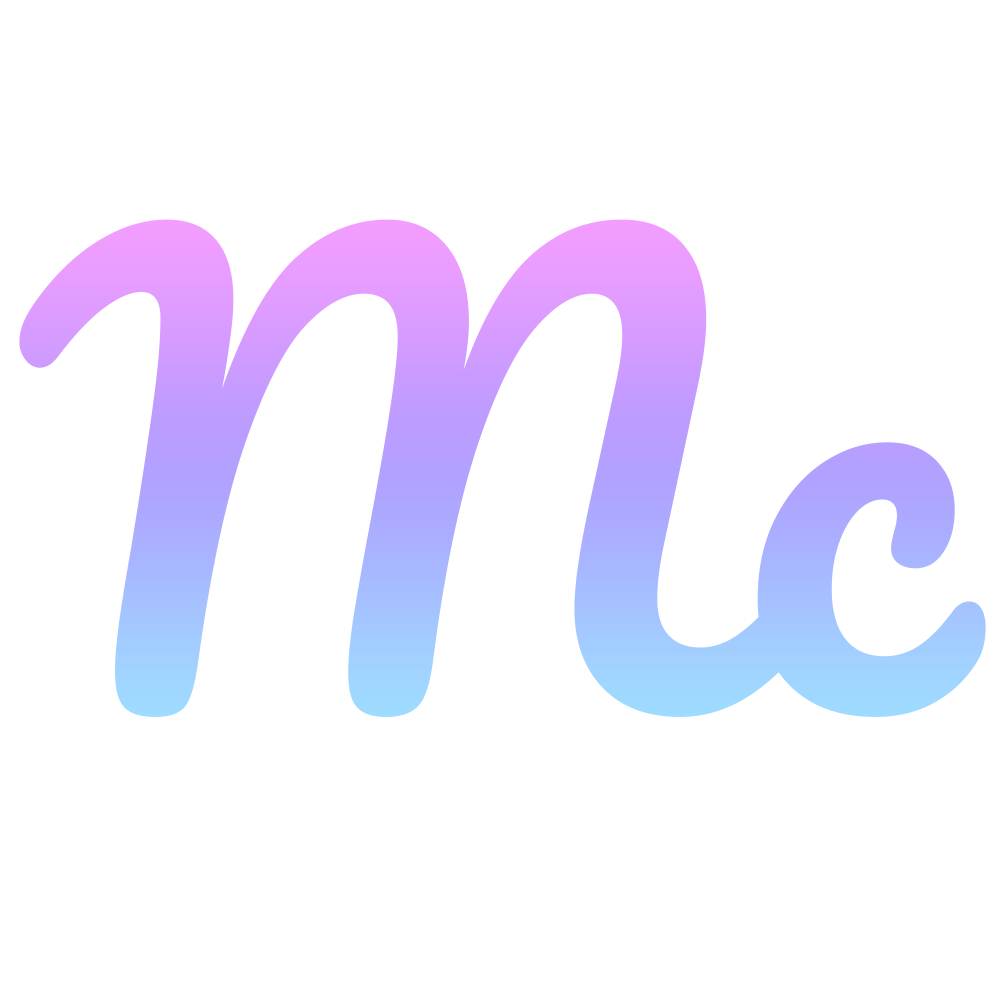
<style>
.page{position:relative;width:1000px;height:1000px;background:#ffffff}
.page>*{position:absolute;margin:0}
.t1{font:583.3px "Pacifico-Regular"}
</style>
<div class="page">
<p class="t1" style="left:19px;top:219px;width:967px;height:498px">Mc</p>
</div>
